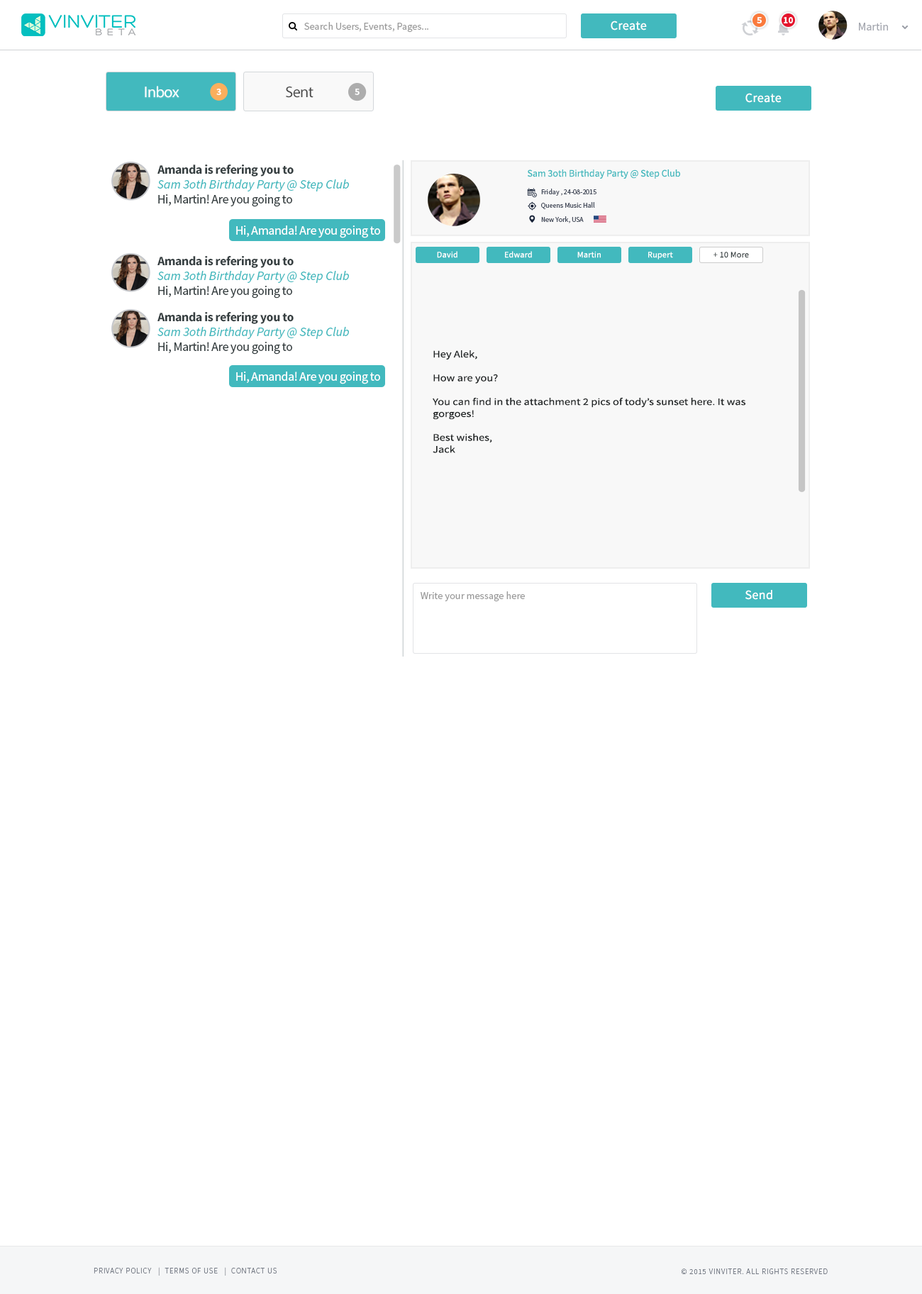
<style>
.page{position:relative;width:922px;height:1294px;background:#ffffff}
.page>*{position:absolute;margin:0}
.t1{font:9.2px "SourceSansPro-Bold";color:#ffffff}
.t2{font:10.2px "SourceSansPro-Regular";color:#999999}
.t3{font:12.8px "SourceSansPro-Regular";letter-spacing:0.02em;color:#ffffff}
.t4{font:11.3px "SourceSansPro-Regular";color:#a3a6ae}
.t5{font:15.6px "MyriadPro-Regular";letter-spacing:-0.025em;color:#ffffff}
.t6{font:9.9px "SourceSansPro-Bold";letter-spacing:-0.025em;color:#ffffff}
.t7{font:15.6px "MyriadPro-Regular";letter-spacing:-0.025em;color:#4b4b4b}
.t8{font:12.8px "SourceSansPro-Bold";letter-spacing:-0.025em;color:#363f41}
.t9{font:9.9px "SourceSansPro-Regular";color:#42b9be}
.t10{font:12.8px "SourceSansPro-It";color:#42b9be}
.t11{font:12.8px "SourceSansPro-Regular";letter-spacing:-0.025em;color:#363f41}
.t12{font:7.1px/9.2px "SourceSansPro-Regular";color:#464d5c}
.t13{font:12.8px "SourceSansPro-Regular";letter-spacing:-0.025em;color:#ffffff}
.t14{font:8.4px "SourceSansPro-Regular";letter-spacing:0.02em;color:#ffffff}
.t15{font:8.4px "SourceSansPro-Regular";letter-spacing:0.02em;color:#363f41}
.t16{font:9.9px "SourceSansPro-Regular";color:#202425;scale:1.17 1}
.t17{font:7.8px "SourceSansPro-Light";letter-spacing:0.075em;color:#747a85;text-transform:uppercase}
</style>
<div class="page">
<p class="t1" style="left:756px;top:17px;width:5px;height:6px">5</p>
<p class="t1" style="left:783px;top:17px;width:10px;height:6px">10</p>
<p class="t2" style="left:304px;top:22px;width:124px;height:11px">Search Users, Events, Pages...</p>
<p class="t3" style="left:610px;top:21px;width:37px;height:9px">Create</p>
<p class="t4" style="left:859px;top:23px;width:29px;height:7px">Martin</p>
<p class="t5" style="left:145px;top:86px;width:34px;height:12px">Inbox</p>
<p class="t6" style="left:216px;top:89px;width:5px;height:6px">3</p>
<p class="t7" style="left:286px;top:86px;width:27px;height:12px">Sent</p>
<p class="t6" style="left:354px;top:89px;width:5px;height:6px">5</p>
<p class="t3" style="left:745px;top:93px;width:36px;height:10px">Create</p>
<p class="t8" style="left:157px;top:164px;width:137px;height:13px">Amanda is refering you to</p>
<p class="t9" style="left:527px;top:169px;width:153px;height:10px">Sam 3oth Birthday Party @ Step Club</p>
<p class="t10" style="left:157px;top:179px;width:192px;height:12px">Sam 3oth Birthday Party @ Step Club</p>
<p class="t11" style="left:158px;top:194px;width:134px;height:13px">Hi, Martin! Are you going to</p>
<p class="t12" style="left:541px;top:189px;width:55px;height:34px">Friday , 24-08-2015<br>Queens Music Hall<br>New York, USA</p>
<p class="t13" style="left:236px;top:225px;width:144px;height:13px">Hi, Amanda! Are you going to</p>
<p class="t8" style="left:157px;top:256px;width:137px;height:12px">Amanda is refering you to</p>
<p class="t14" style="left:437px;top:251px;width:20px;height:7px">David</p>
<p class="t14" style="left:505px;top:251px;width:27px;height:7px">Edward</p>
<p class="t14" style="left:577px;top:251px;width:23px;height:7px">Martin</p>
<p class="t14" style="left:648px;top:252px;width:25px;height:7px">Rupert</p>
<p class="t15" style="left:713px;top:252px;width:36px;height:6px">+ 10 More</p>
<p class="t10" style="left:157px;top:271px;width:192px;height:12px">Sam 3oth Birthday Party @ Step Club</p>
<p class="t11" style="left:158px;top:286px;width:134px;height:12px">Hi, Martin! Are you going to</p>
<p class="t8" style="left:157px;top:312px;width:137px;height:12px">Amanda is refering you to</p>
<p class="t10" style="left:157px;top:327px;width:192px;height:12px">Sam 3oth Birthday Party @ Step Club</p>
<p class="t11" style="left:158px;top:342px;width:134px;height:12px">Hi, Martin! Are you going to</p>
<p class="t16" style="left:432px;top:350px;width:313px;height:103px">Hey Alek,<br><br>How are you?<br><br>You can find in the attachment 2 pics of tody’s sunset here. It was gorgoes!<br><br>Best wishes,<br>Jack</p>
<p class="t13" style="left:236px;top:371px;width:144px;height:13px">Hi, Amanda! Are you going to</p>
<p class="t2" style="left:420px;top:591px;width:105px;height:11px">Write your message here</p>
<p class="t3" style="left:745px;top:590px;width:27px;height:10px">Send</p>
<p class="t17" style="left:94px;top:1267px;width:183px;height:8px">Privacy Policy   |  Terms of Use   |  Contact us</p>
<p class="t17" style="left:681px;top:1268px;width:146px;height:6px">© 2015 VINVITER. All rights reserved</p>
</div>
